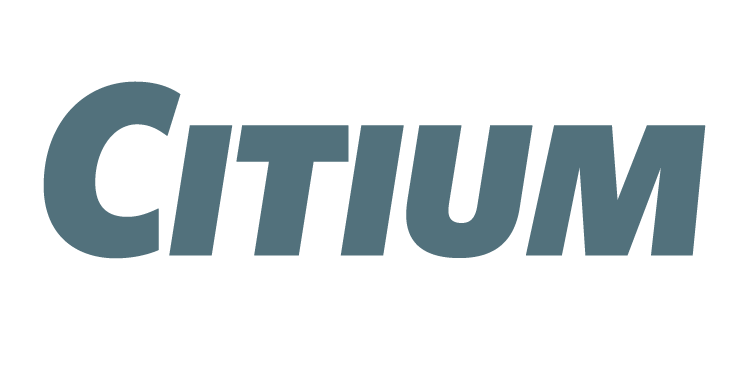
<style>
.page{position:relative;width:750px;height:375px;background:#ffffff}
.page>*{position:absolute;margin:0}
.t1{font:246.8px "Whitney-BlackItalicSC";letter-spacing:-0.05em;color:#52717c;font-weight:bold}
</style>
<div class="page">
<p class="t1" style="left:43px;top:81px;width:663px;height:178px">Citium</p>
</div>
